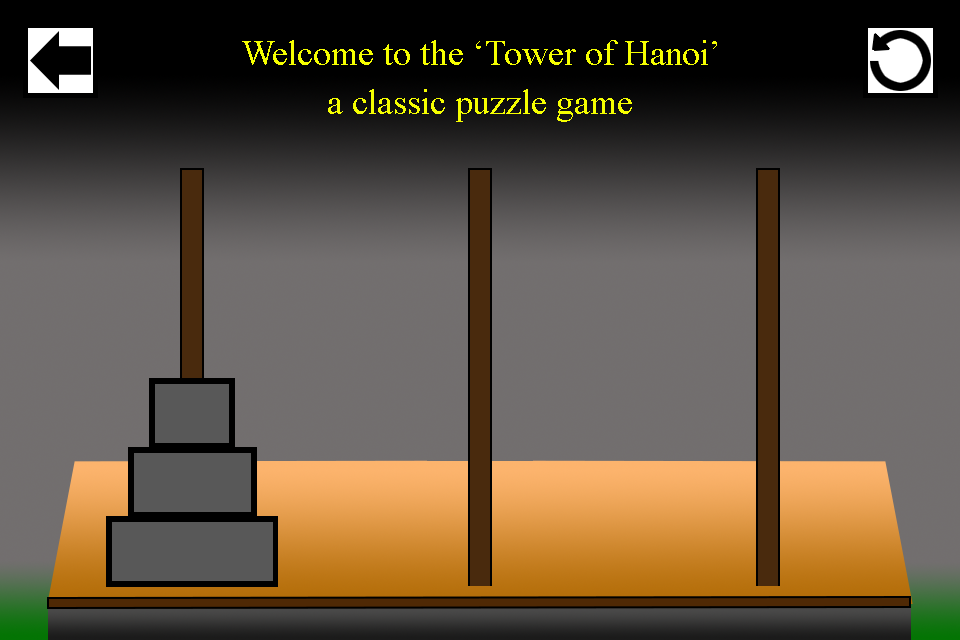
<style>
.page{position:relative;width:960px;height:640px}
.page>*{position:absolute;margin:0}
.t1{font:36px "TimesNewRomanPSMT";color:#f6ff00}
</style>
<div class="page">
<p class="t1" style="left:242px;top:40px;width:475px;height:25px">Welcome to the ‘Tower of Hanoi’</p>
<p class="t1" style="left:328px;top:89px;width:304px;height:33px">a classic puzzle game</p>
</div>
